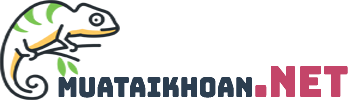
<style>
.page{position:relative;width:350px;height:100px;background:#ffffff}
.page>*{position:absolute;margin:0}
.t1{font:27.3px "Bungee-Regular";color:#2c3e50;scale:0.9 1}
.t2{font:43.1px "Bungee-Regular";color:#c44569;scale:0.9 1}
</style>
<div class="page">
<p class="t1" style="left:58px;top:66px;width:290px;height:32px">MUATAIKHOAN<span class="t2">.net</span></p>
</div>
